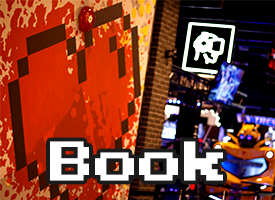
<style>
.page{position:relative;width:275px;height:200px}
.page>*{position:absolute;margin:0}
.t1{font:44.5px "PressStart2P";color:#ffffff}
</style>
<div class="page">
<p class="t1" style="left:50px;top:141px;width:173px;height:40px">Book</p>
</div>
